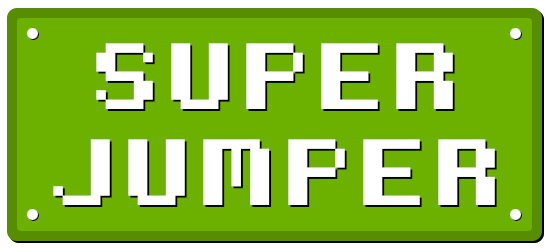
<style>
.page{position:relative;width:548px;height:248px;background:#6cb100}
.page>*{position:absolute;margin:0}
.t1{font:150px/96px "8-Bit-Madness";color:#ffffff}
</style>
<div class="page">
<p class="t1" style="left:53px;top:43px;width:442px;height:162px;text-align:center">SUPER<br>JUMPER</p>
<p class="t1" style="left:55px;top:45px;width:442px;height:162px;text-align:center">SUPER<br>JUMPER</p>
</div>
